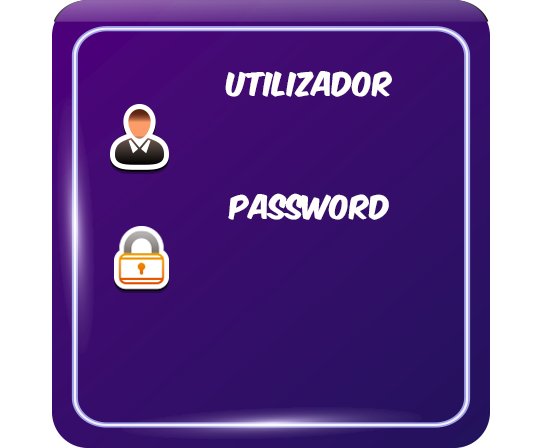
<style>
.page{position:relative;width:544px;height:448px;background:#ffffff}
.page>*{position:absolute;margin:0}
.t1{font:28px "KomikaAxis";color:#fffefd}
</style>
<div class="page">
<p class="t1" style="left:225px;top:71px;width:167px;height:26px">utilizador</p>
<p class="t1" style="left:228px;top:193px;width:161px;height:27px">Password</p>
</div>
